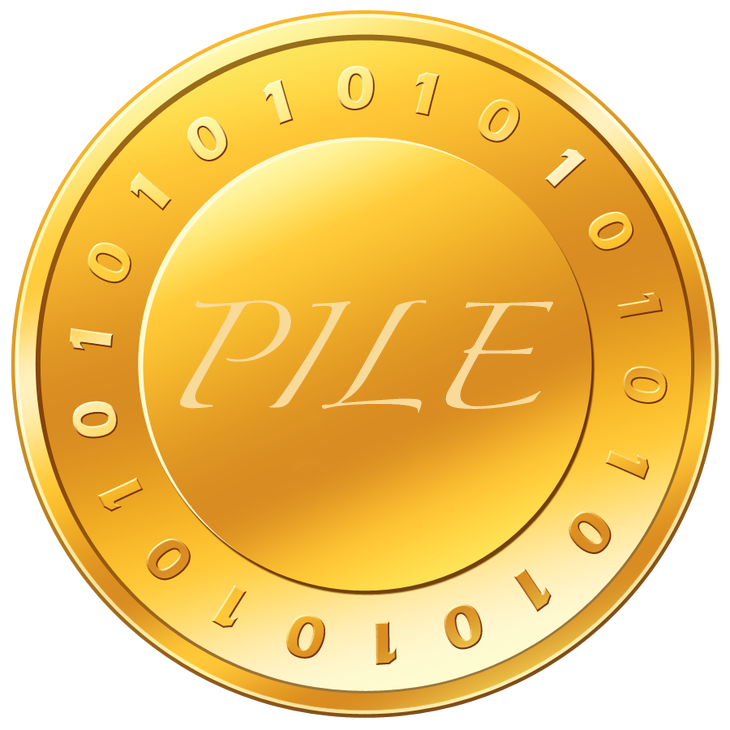
<style>
.page{position:relative;width:730px;height:730px;background:#ffffff}
.page>*{position:absolute;margin:0}
.t1{font:95px "Zapfino";color:#f8da9a}
</style>
<div class="page">
<p class="t1" style="left:180px;top:300px;width:374px;height:113px">PILE</p>
</div>
